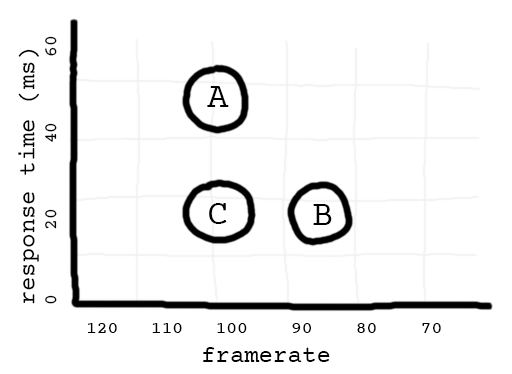
<style>
.page{position:relative;width:512px;height:374px;background:#ffffff}
.page>*{position:absolute;margin:0}
.t1{font:18px "CourierPrime";color:#000000}
.t2{font:24px "CourierPrime";color:#000000}
.t3{font:36px "CourierPrime";color:#000000}
</style>
<div class="page">
<p class="t1" style="left:18px;top:36px;width:39px;height:268px;rotate:-90deg"><span class="t2">response time (ms)<br></span>0      20      40      60</p>
<p class="t3" style="left:207px;top:86px;width:22px;height:21px">A</p>
<p class="t3" style="left:209px;top:203px;width:18px;height:21px">C</p>
<p class="t3" style="left:313px;top:204px;width:19px;height:21px">B</p>
<p class="t1" style="left:88px;top:323px;width:353px;height:39px">120   110   100    90    80    70<br><span class="t2">        framerate</span></p>
</div>
